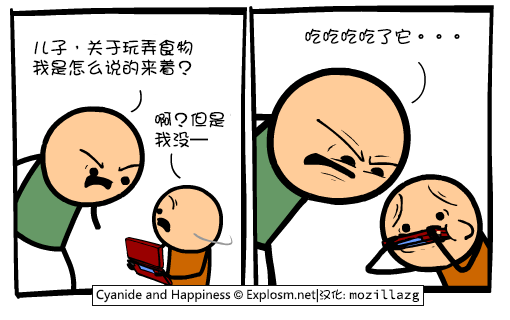
<style>
.page{position:relative;width:510px;height:320px;background:#ffffff}
.page>*{position:absolute;margin:0}
.t1{font:18px "DFGirl";color:#000000}
.t2{font:18px/20px "DFGirl";color:#000000}
</style>
<div class="page">
<p class="t1" style="left:305px;top:28px;width:155px;height:17px">吃吃吃吃了它。。。</p>
<p class="t2" style="left:32px;top:39px;width:161px;height:37px">儿子，关于玩弄食物<br>我是怎么说的来着？</p>
<p class="t2" style="left:154px;top:112px;width:71px;height:36px">啊？但是<br>我没—</p>
</div>
